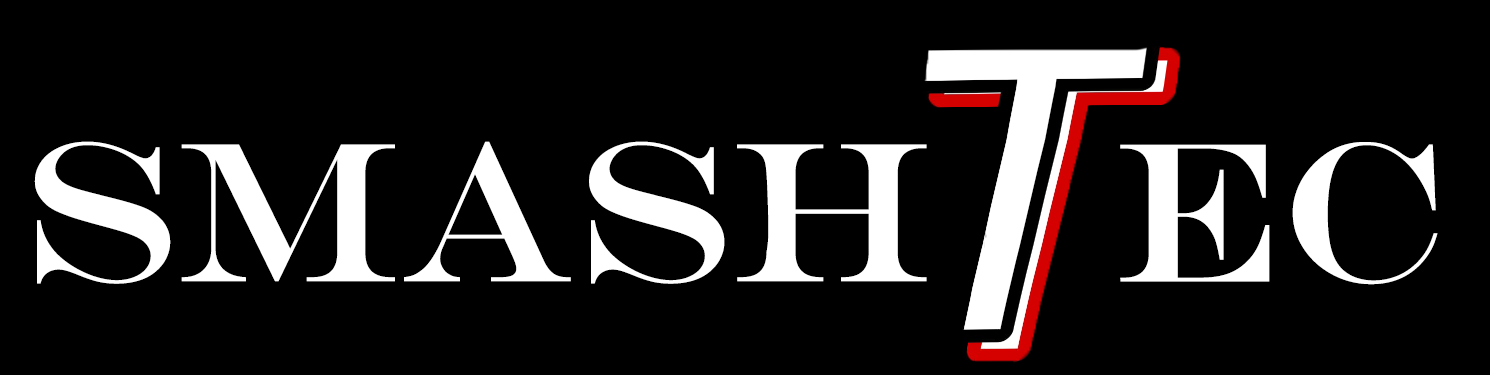
<style>
.page{position:relative;width:1490px;height:375px;background:#000000}
.page>*{position:absolute;margin:0}
.t1{font:200px "EngraversMT";color:#ffffff}
</style>
<div class="page">
<p class="t1" style="left:34px;top:141px;width:893px;height:143px">Smash</p>
<p class="t1" style="left:1120px;top:142px;width:318px;height:143px">ec</p>
</div>
